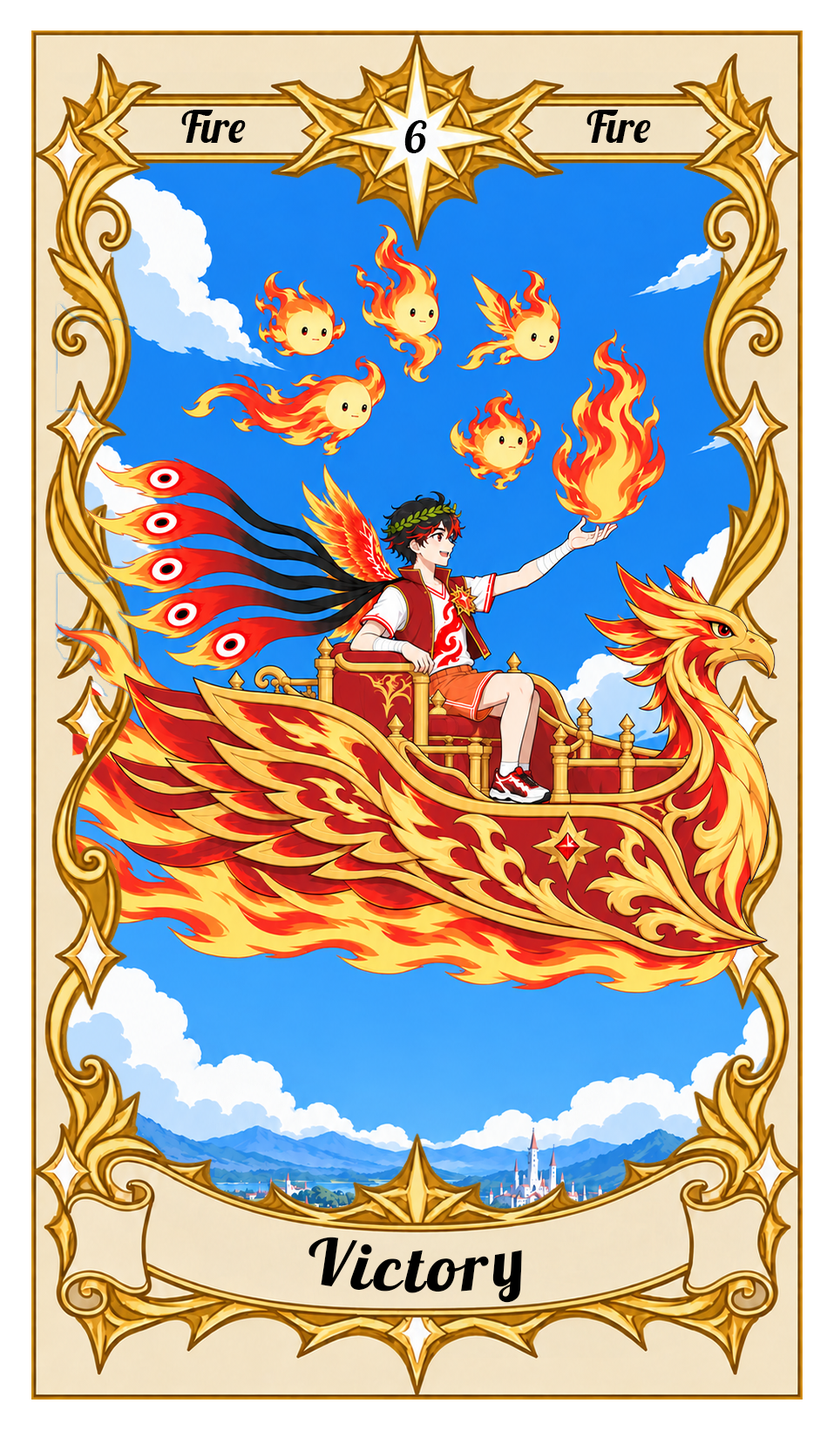
<style>
.page{position:relative;width:834px;height:1430px}
.page>*{position:absolute;margin:0}
.t1{font:43.6px "Lobster-Regular";color:#000000}
.t2{font:65.3px "Lobster-Regular";letter-spacing:0.05em;color:#000000}
</style>
<div class="page">
<p class="t1" style="left:181px;top:110px;width:65px;height:33px">Fire</p>
<p class="t1" style="left:586px;top:110px;width:65px;height:33px">Fire</p>
<p class="t1" style="left:404px;top:120px;width:23px;height:33px">6</p>
<p class="t2" style="left:308px;top:1237px;width:214px;height:66px">Victory</p>
</div>
